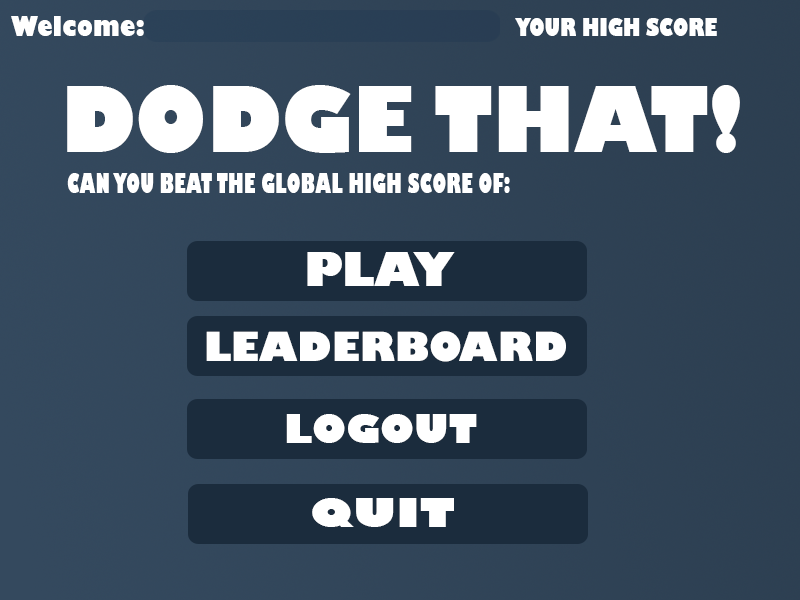
<style>
.page{position:relative;width:800px;height:600px}
.page>*{position:absolute;margin:0}
.t1{font:27.5px "GillSans-UltraBold";color:#ffffff;scale:0.82 1}
.t2{font:24.3px "GillSans-UltraBold";color:#ffffff;scale:0.73 1}
.t3{font:88px "GillSans-UltraBold";color:#ffffff;scale:0.95 1}
.t4{font:26.7px "GillSans-UltraBold";color:#ffffff;scale:0.62 1}
.t5{font:46px "GillSans-UltraBold";color:#ffffff}
.t6{font:39.3px "GillSans-UltraBold";color:#ffffff}
.t7{font:38.5px "GillSans-UltraBold";color:#ffffff;scale:1.04 1}
.t8{font:38.5px "GillSans-UltraBold";color:#ffffff;scale:1.3 1}
</style>
<div class="page">
<p class="t1" style="left:11px;top:16px;width:133px;height:20px">Welcome:</p>
<p class="t2" style="left:515px;top:18px;width:202px;height:18px">YOUR HIGH SCORE</p>
<p class="t3" style="left:67px;top:85px;width:673px;height:68px">DODGE THAT!</p>
<p class="t4" style="left:67px;top:173px;width:443px;height:20px">CAN YOU BEAT THE GLOBAL HIGH SCORE OF:</p>
<p class="t5" style="left:307px;top:252px;width:148px;height:34px">PLAY</p>
<p class="t6" style="left:206px;top:331px;width:360px;height:31px">LEADERBOARD</p>
<p class="t7" style="left:286px;top:414px;width:191px;height:29px">LOGOUT</p>
<p class="t8" style="left:312px;top:498px;width:142px;height:29px">QUIT</p>
</div>
